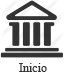
<style>
.page{position:relative;width:64px;height:74px;background:#ffffff}
.page>*{position:absolute;margin:0}
.t1{font:12px "TimesNewRomanPSMT";color:#333333}
</style>
<div class="page">
<p class="t1" style="left:19px;top:63px;width:28px;height:9px">Inicio</p>
</div>
